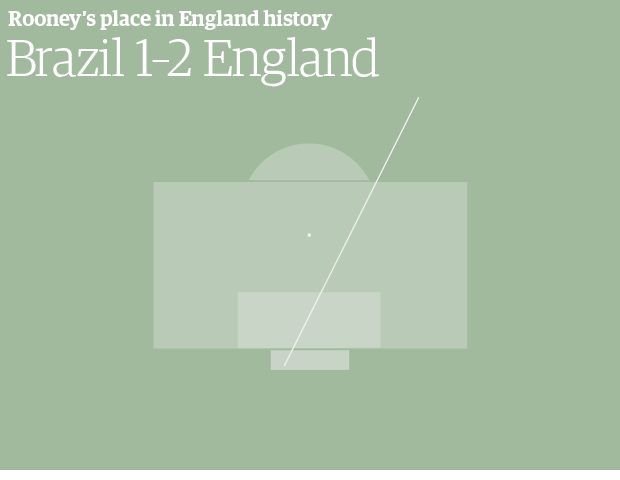
<style>
.page{position:relative;width:620px;height:480px;background:#a1ba9d}
.page>*{position:absolute;margin:0}
.t1{font:21.2px "DE5DisplayEgyptianSemiBold";color:#ffffff}
.t2{font:52px "DE2DisplayEgyptianLight";color:#ffffff}
</style>
<div class="page">
<p class="t1" style="left:8px;top:10px;width:325px;height:20px">Rooney’s place in England history</p>
<p class="t2" style="left:7px;top:37px;width:372px;height:50px">Brazil 1–2 England</p>
</div>
